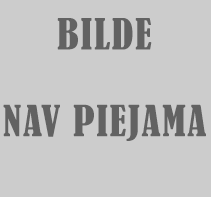
<style>
.page{position:relative;width:211px;height:197px;background:#cccccc}
.page>*{position:absolute;margin:0}
.t1{font:40px/86.7px "BernardMT-Condensed";letter-spacing:0.04em;color:#626262}
</style>
<div class="page">
<p class="t1" style="left:3px;top:18px;width:203px;height:123px;text-align:justify">BILDE<br>NAV PIEJAMA</p>
</div>
